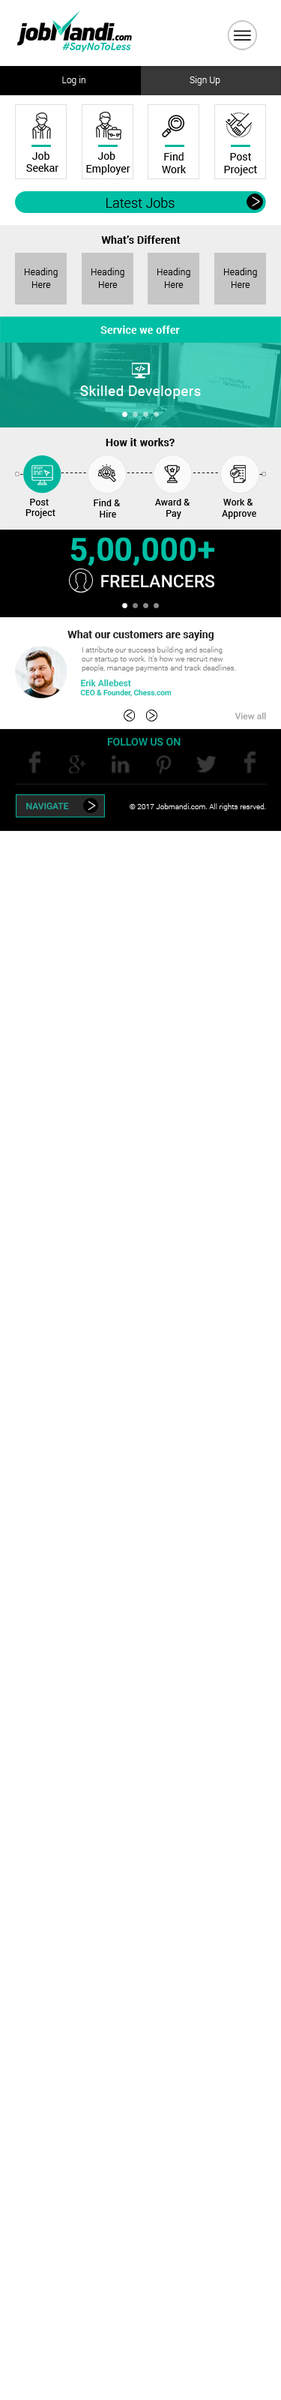
<style>
.page{position:relative;width:281px;height:2400px;background:#ffffff}
.page>*{position:absolute;margin:0}
.t1{font:9px "Roboto-Light";color:#ffffff}
.t2{font:10.5px "Roboto-Regular";color:#000000}
.t3{font:13.5px "Roboto-Light";color:#000000}
.t4{font:24px "Roboto-Thin";letter-spacing:0.02em;color:#ffffff;scale:0.74 1}
.t5{font:10.5px "Roboto-Bold";letter-spacing:0.02em;color:#000000}
.t6{font:9px/12.3px "Roboto-Light";letter-spacing:0.02em;color:#000000}
.t7{font:10.5px "Roboto-Bold";letter-spacing:0.02em;color:#ffffff}
.t8{font:14.2px "Roboto-Regular";letter-spacing:0.02em;color:#ffffff}
.t9{font:9px "Roboto-Regular";letter-spacing:0.22em}
.t10{font:9px "Roboto-Regular";letter-spacing:0.22em;color:#000000}
.t11{font:9px "Roboto-Regular";letter-spacing:0.02em;color:#000000}
.t12{font:31.4px "Roboto-Medium";color:#00bfa5;text-transform:uppercase;font-weight:bold}
.t13{font:17.2px "Roboto-Medium";color:#ffffff;text-transform:uppercase}
.t14{font:10.5px "Roboto-Bold";color:#1f1f1f}
.t15{font:7.5px "Roboto-Light";color:#747474}
.t16{font:7.5px "Roboto-Medium";color:#1fbea9}
.t17{font:9px "Roboto-Medium";color:#1fbea9}
.t18{font:17.2px "Roboto-Thin";letter-spacing:0.02em;scale:0.74 1}
.t19{font:17.2px "Roboto-Thin";letter-spacing:0.02em;color:#000000;scale:0.74 1}
.t20{font:9px "Roboto-Medium";color:#9c9c9c}
.t21{font:10.5px "Roboto-Medium";color:#00bfa5;text-transform:uppercase}
.t22{font:10.5px "Roboto-Medium";color:#00bfa5}
.t23{font:22.4px "Roboto-Thin";letter-spacing:0.02em;color:#ffffff;scale:0.74 1}
.t24{font:7.5px "Roboto-Light";color:#ffffff}
.t25{font:7.5px "Roboto-Light";color:#ffffff;text-transform:uppercase}
</style>
<div class="page">
<p class="t1" style="left:62px;top:76px;width:23px;height:9px">Log in</p>
<p class="t1" style="left:190px;top:76px;width:30px;height:9px">Sign Up</p>
<p class="t2" style="left:26px;top:151px;width:32px;height:21px;text-align:center">Job <br>Seekar</p>
<p class="t2" style="left:86px;top:151px;width:44px;height:24px;text-align:center">Job <br>Employer</p>
<p class="t2" style="left:162px;top:152px;width:24px;height:21px;text-align:center">Find<br>Work</p>
<p class="t2" style="left:224px;top:153px;width:33px;height:22px;text-align:center">Post<br>Project</p>
<p class="t3" style="left:106px;top:197px;width:69px;height:11px">Latest Jobs</p>
<p class="t4" style="left:252px;top:196px;width:8px;height:11px;rotate:180deg">&lt;</p>
<p class="t5" style="left:101px;top:235px;width:80px;height:9px">What’s Different</p>
<p class="t6" style="left:25px;top:268px;width:33px;height:20px;text-align:center">Heading<br>Here</p>
<p class="t6" style="left:91px;top:268px;width:33px;height:20px;text-align:center">Heading<br>Here</p>
<p class="t6" style="left:157px;top:268px;width:33px;height:20px;text-align:center">Heading<br>Here</p>
<p class="t6" style="left:224px;top:268px;width:33px;height:20px;text-align:center">Heading<br>Here</p>
<p class="t7" style="left:100px;top:325px;width:80px;height:9px">Service we offer</p>
<p class="t8" style="left:80px;top:385px;width:121px;height:14px">Skilled Developers</p>
<p class="t5" style="left:106px;top:438px;width:69px;height:8px">How it works?</p>
<p class="t9" style="left:20px;top:474px;width:12px;height:1px">---</p>
<p class="t10" style="left:61px;top:472px;width:25px;height:1px">------</p>
<p class="t10" style="left:127px;top:472px;width:25px;height:1px">------</p>
<p class="t10" style="left:193px;top:472px;width:25px;height:1px">------</p>
<p class="t10" style="left:259px;top:474px;width:3px;height:1px">-</p>
<p class="t11" style="left:25px;top:499px;width:30px;height:19px;text-align:center">Post <br>Project</p>
<p class="t11" style="left:94px;top:499px;width:26px;height:18px;text-align:center">Find &amp; <br>Hire</p>
<p class="t11" style="left:155px;top:499px;width:35px;height:20px;text-align:center">Award &amp; <br>Pay</p>
<p class="t11" style="left:222px;top:499px;width:34px;height:20px;text-align:center">Work &amp; <br>Approve</p>
<p class="t12" style="left:70px;top:537px;width:144px;height:29px">5,00,000+</p>
<p class="t13" style="left:101px;top:574px;width:113px;height:14px">FREELANCERS</p>
<p class="t14" style="left:67px;top:630px;width:147px;height:10px">What our customers are saying</p>
<p class="t15" style="left:82px;top:646px;width:154px;height:26px;opacity:0.88">I attribute our success building and scaling <br>our startup to work. It’s how we recruit new <br>people, manage payments and track deadlines.</p>
<p class="t16" style="left:80px;top:679px;width:92px;height:18px"><span class="t17">Erik Allebest<br></span>CEO &amp; Founder, Chess.com</p>
<p class="t18" style="left:126px;top:712px;width:7px;height:7px">&lt;</p>
<p class="t19" style="left:149px;top:712px;width:6px;height:7px;rotate:180deg">&lt;</p>
<p class="t20" style="left:235px;top:712px;width:31px;height:8px;opacity:0.88">View all</p>
<p class="t21" style="left:107px;top:737px;width:74px;height:9px;opacity:0.88"><span class="t22">F</span>ollow us on</p>
<p class="t17" style="left:26px;top:802px;width:43px;height:8px;opacity:0.88">NAVIGATE</p>
<p class="t23" style="left:88px;top:801px;width:8px;height:10px;rotate:180deg">&lt;</p>
<p class="t24" style="left:130px;top:803px;width:136px;height:8px"><span class="t25">© 2017 </span>Jobmandi.com<span class="t25">. A</span>ll rights resrved.</p>
</div>
